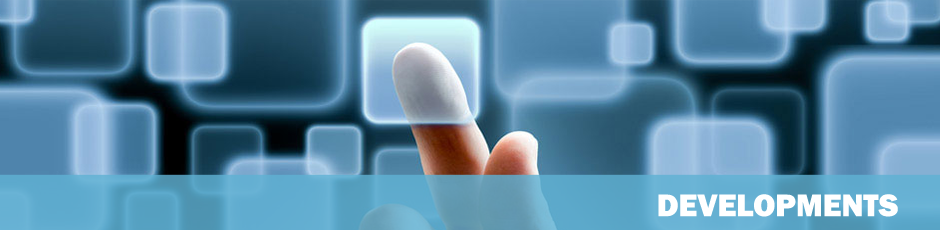
<style>
.page{position:relative;width:940px;height:230px}
.page>*{position:absolute;margin:0}
.t1{font:32px "FranklinGothic-Heavy";color:#ffffff}
</style>
<div class="page">
<p class="t1" style="left:658px;top:194px;width:240px;height:23px">DEVELOPMENTS</p>
</div>
